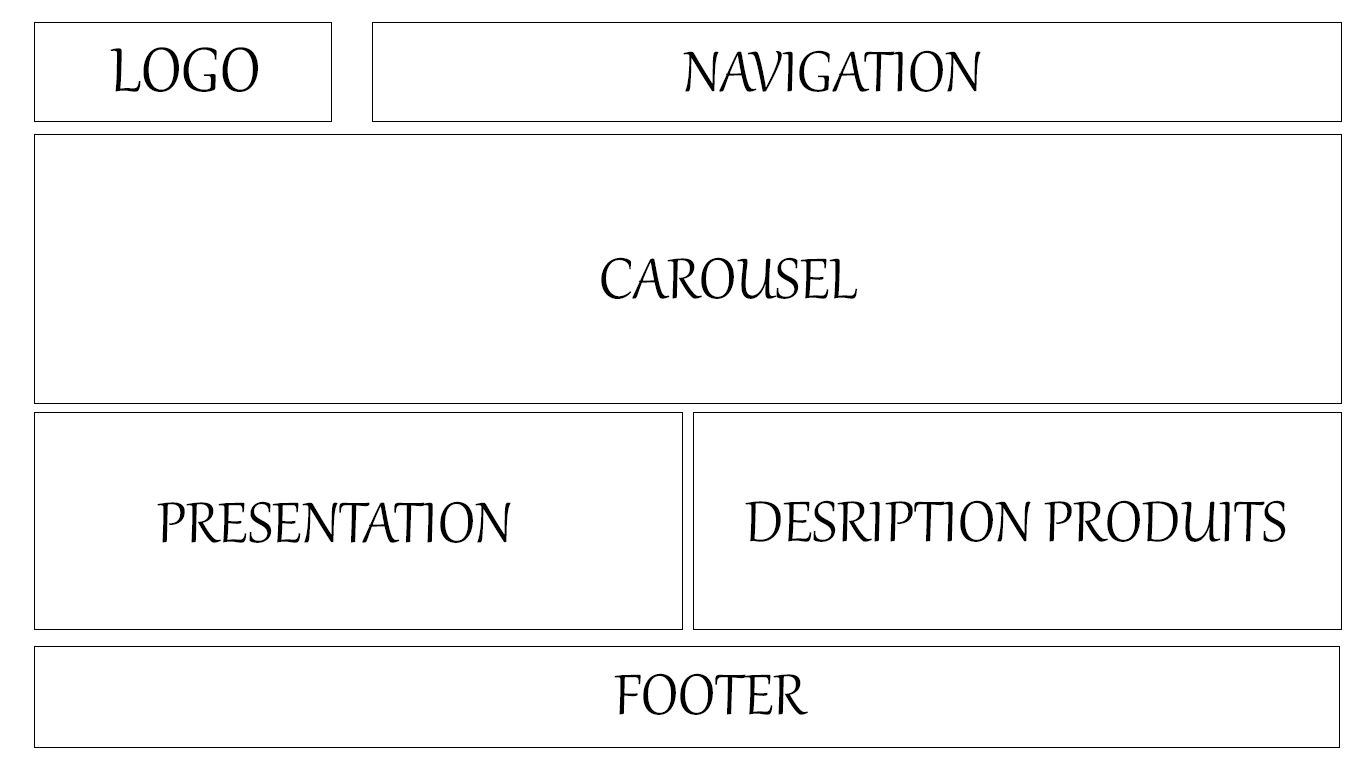
<style>
.page{position:relative;width:1366px;height:768px;background:#ffffff}
.page>*{position:absolute;margin:0}
.t1{font:76.3px "Gabriola";color:#000000}
.t2{font:70px "Gabriola";color:#000000}
</style>
<div class="page">
<p class="t1" style="left:110px;top:47px;width:148px;height:45px">LOGO</p>
<p class="t2" style="left:683px;top:50px;width:298px;height:42px">NAVIGATION</p>
<p class="t2" style="left:601px;top:257px;width:256px;height:42px">CAROUSEL</p>
<p class="t2" style="left:157px;top:501px;width:354px;height:42px">PRESENTATION</p>
<p class="t2" style="left:745px;top:500px;width:541px;height:42px">DESRIPTION PRODUITS</p>
<p class="t2" style="left:614px;top:673px;width:194px;height:42px">FOOTER</p>
</div>
